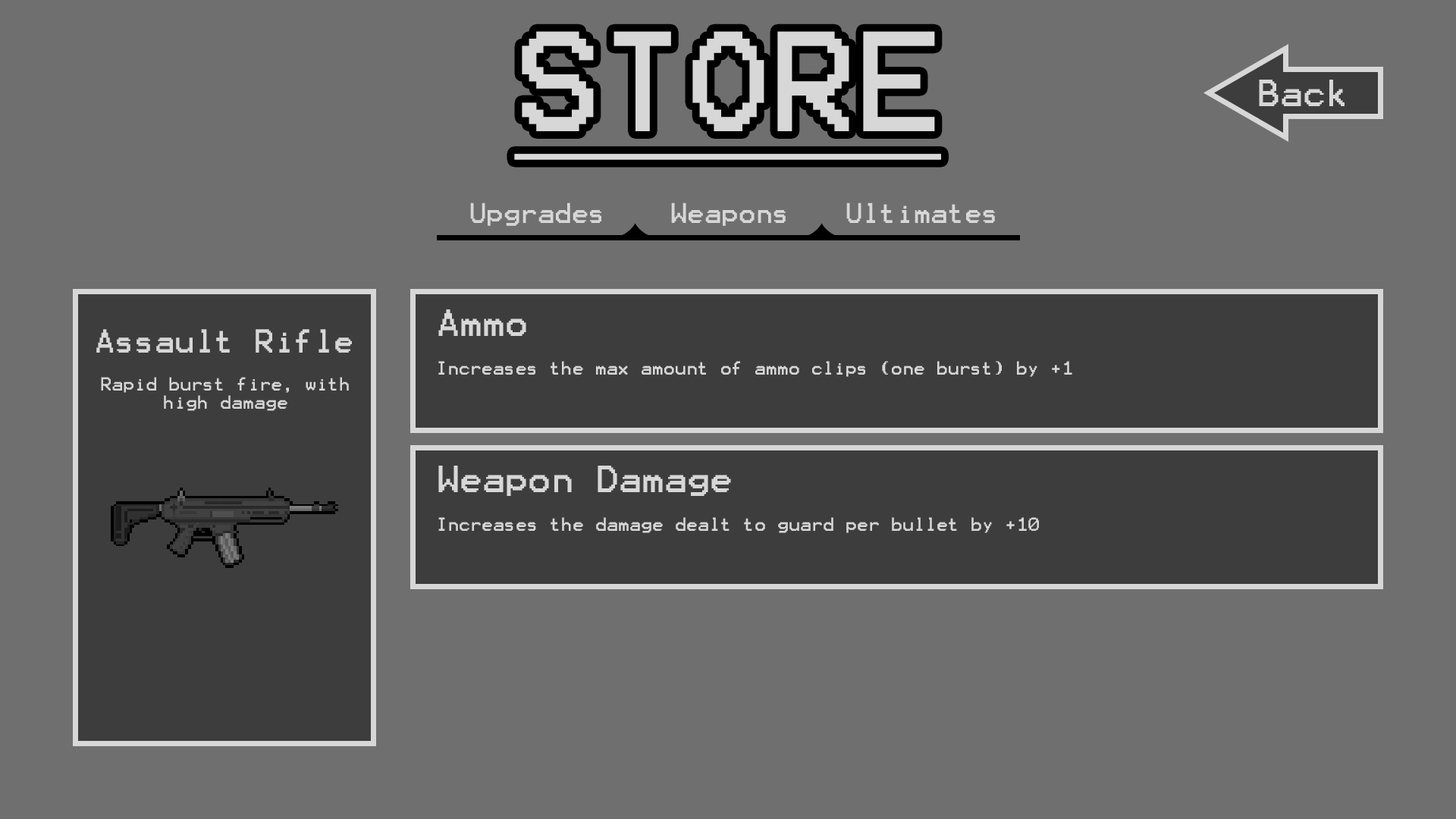
<style>
.page{position:relative;width:1456px;height:819px;background:#6f6f6f}
.page>*{position:absolute;margin:0}
.t1{font:113.7px "Terminal";color:#d7d7d7;text-decoration:underline}
.t2{font:22.7px "Terminal";color:#d7d7d7}
.t3{font:30.3px "Terminal";color:#d7d7d7}
.t4{font:15.2px "Terminal";color:#d7d7d7}
</style>
<div class="page">
<p class="t1" style="left:514px;top:31px;width:427px;height:129px">STORE</p>
<p class="t2" style="left:671px;top:202px;width:115px;height:24px">Weapons</p>
<p class="t3" style="left:438px;top:309px;width:88px;height:27px">Ammo</p>
<p class="t4" style="left:438px;top:361px;width:634px;height:16px">Increases the max amount of ammo clips (one burst) by +1</p>
<p class="t3" style="left:438px;top:466px;width:293px;height:30px">Weapon Damage</p>
<p class="t4" style="left:438px;top:517px;width:601px;height:16px">Increases the damage dealt to guard per bullet by +10</p>
</div>
